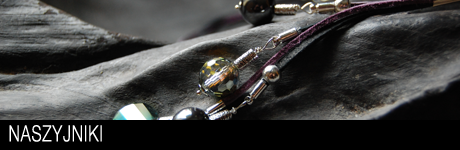
<style>
.page{position:relative;width:460px;height:150px}
.page>*{position:absolute;margin:0}
.t1{font:22.4px "HelveticaNeueCE-Light";letter-spacing:0.05em;color:#ffffff;scale:0.71 1}
</style>
<div class="page">
<p class="t1" style="left:9px;top:125px;width:93px;height:17px">NASZYJNIKI</p>
</div>
